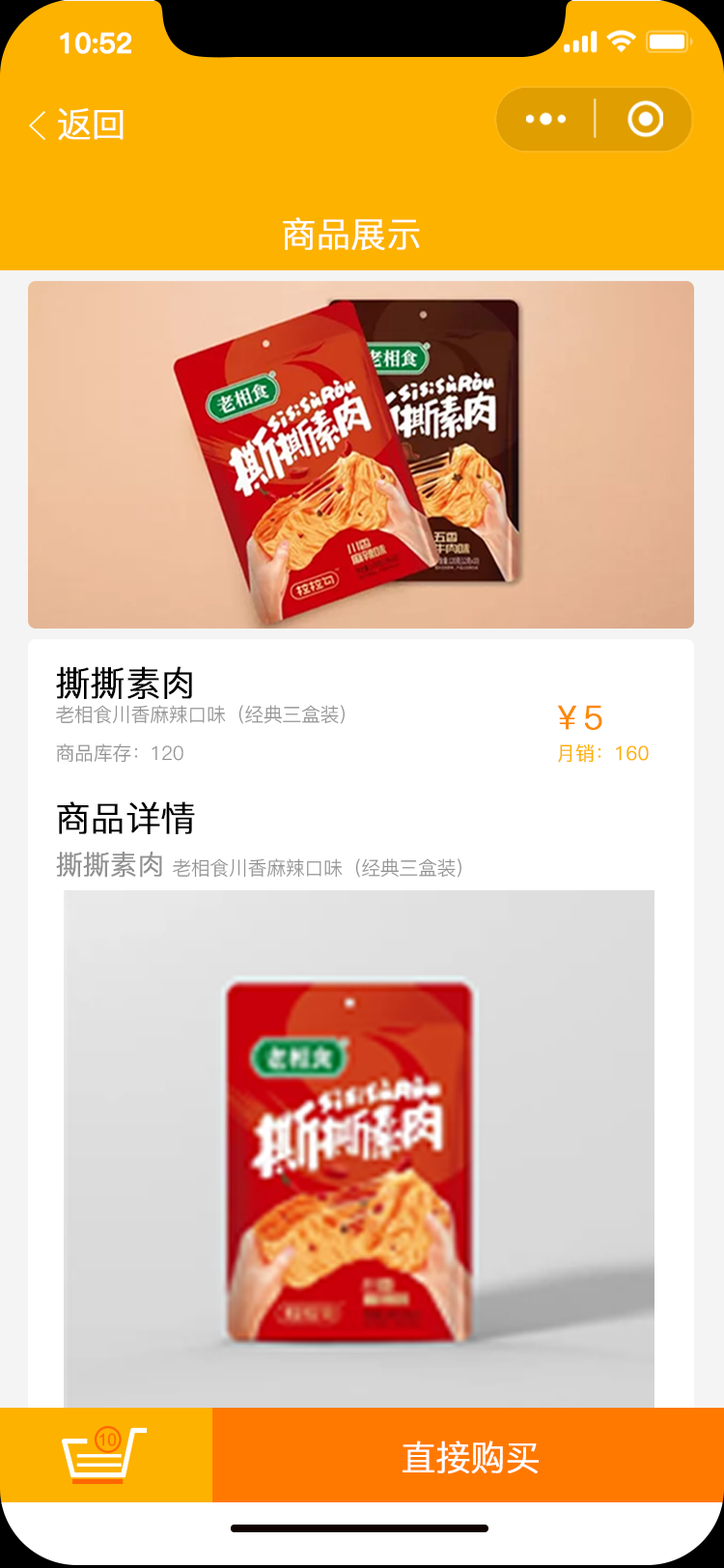
<style>
.page{position:relative;width:724px;height:1568px;background:#ffffff}
.page>*{position:absolute;margin:0}
.t1{font:27.5px "PingFang-SC-Bold";letter-spacing:-0.02em;color:#ffffff;font-weight:bold}
.t2{font:34.8px "PingFang-SC-Regular";letter-spacing:-0.02em;color:#ffffff;font-weight:bold}
.t3{font:34.8px "PingFang-SC-Regular";letter-spacing:-0.02em;color:#000000;font-weight:bold}
.t4{font:19.3px "PingFang-SC-Regular";letter-spacing:-0.02em;color:#919191}
.t5{font:32.8px "PingFang-SC-Regular";letter-spacing:-0.02em;color:#fd8900;font-weight:bold}
.t6{font:19.3px "PingFang-SC-Regular";letter-spacing:-0.02em;color:#fdb200;font-weight:bold}
.t7{font:27px "PingFang-SC-Regular";letter-spacing:-0.02em;color:#919191;font-weight:bold}
</style>
<div class="page">
<p class="t1" style="left:60px;top:32px;width:71px;height:22px">10:52</p>
<p class="t2" style="left:58px;top:108px;width:66px;height:32px">返回</p>
<p class="t2" style="left:283px;top:217px;width:137px;height:33px">商品展示</p>
<p class="t3" style="left:56px;top:666px;width:136px;height:33px">撕撕素肉</p>
<p class="t4" style="left:56px;top:705px;width:289px;height:19px">老相食川香麻辣口味（经典三盒装）</p>
<p class="t5" style="left:558px;top:705px;width:44px;height:25px">￥5</p>
<p class="t4" style="left:56px;top:743px;width:127px;height:20px">商品库存：120</p>
<p class="t6" style="left:558px;top:743px;width:91px;height:20px">月销：160</p>
<p class="t3" style="left:57px;top:801px;width:138px;height:33px">商品详情</p>
<p class="t7" style="left:56px;top:852px;width:106px;height:26px">撕撕素肉</p>
<p class="t4" style="left:173px;top:858px;width:289px;height:20px">老相食川香麻辣口味（经典三盒装）</p>
<p class="t2" style="left:403px;top:1441px;width:136px;height:33px">直接购买</p>
</div>
